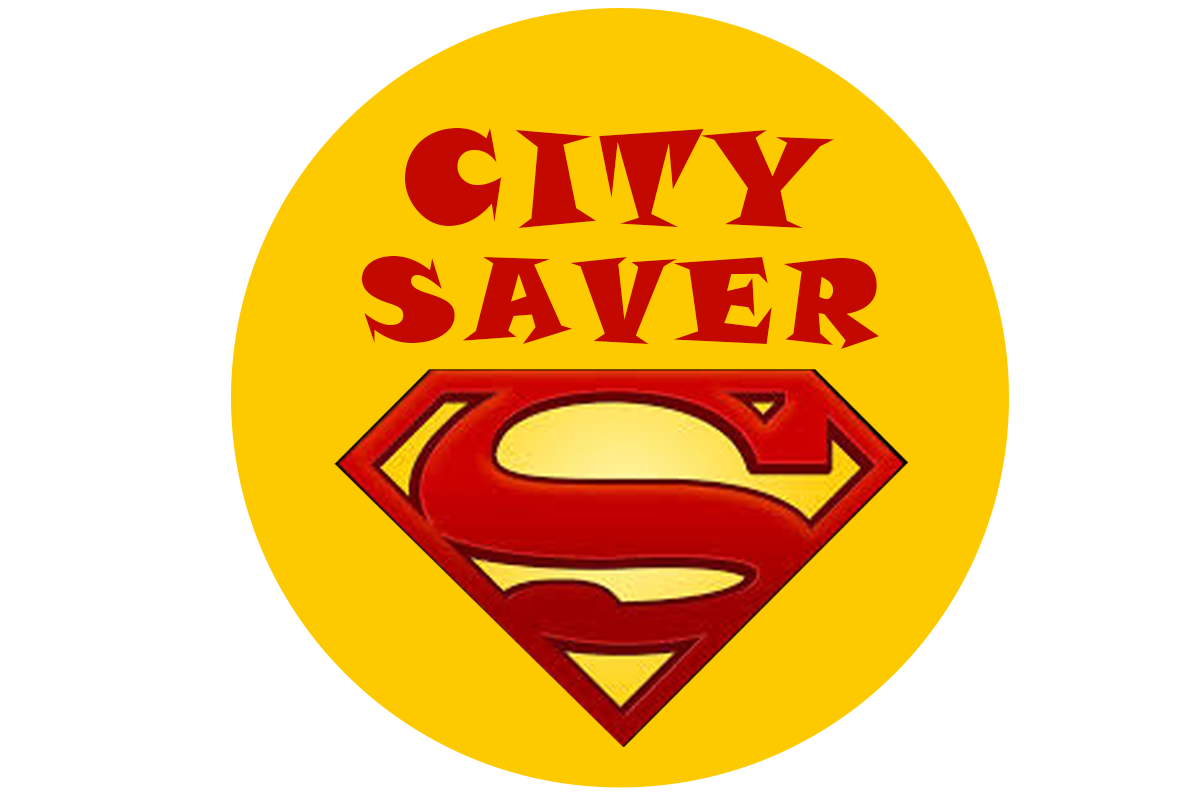
<style>
.page{position:relative;width:1200px;height:800px;background:#ffffff}
.page>*{position:absolute;margin:0}
.t1{font:130.2px "SnapITC-Regular";letter-spacing:0.1em;color:#c30800}
.t2{font:115.8px "SnapITC-Regular";letter-spacing:0.1em;color:#c30800}
</style>
<div class="page">
<p class="t1" style="left:404px;top:128px;width:430px;height:100px">CITY</p>
<p class="t2" style="left:361px;top:256px;width:518px;height:93px">SAVER</p>
</div>
